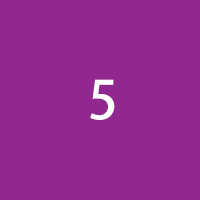
<style>
.page{position:relative;width:200px;height:200px;background:#912890}
.page>*{position:absolute;margin:0}
.t1{font:53px "AdobeHeitiStd-Regular";letter-spacing:0.05em;color:#ffffff}
</style>
<div class="page">
<p class="t1" style="left:90px;top:79px;width:25px;height:41px">5</p>
</div>
